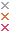
<style>
.page{position:relative;width:11px;height:33px;background:#ffffff}
.page>*{position:absolute;margin:0}
.t1{font:12px "SimSun";color:#a2a2a2;font-weight:bold}
.t2{font:12px "SimSun";color:#da703f;font-weight:bold}
.t3{font:12px "SimSun";color:#db4275;font-weight:bold}
</style>
<div class="page">
<p class="t1" style="left:1px;top:2px;width:8px;height:7px">×</p>
<p class="t2" style="left:1px;top:13px;width:8px;height:7px">×</p>
<p class="t3" style="left:1px;top:24px;width:8px;height:7px">×</p>
</div>
